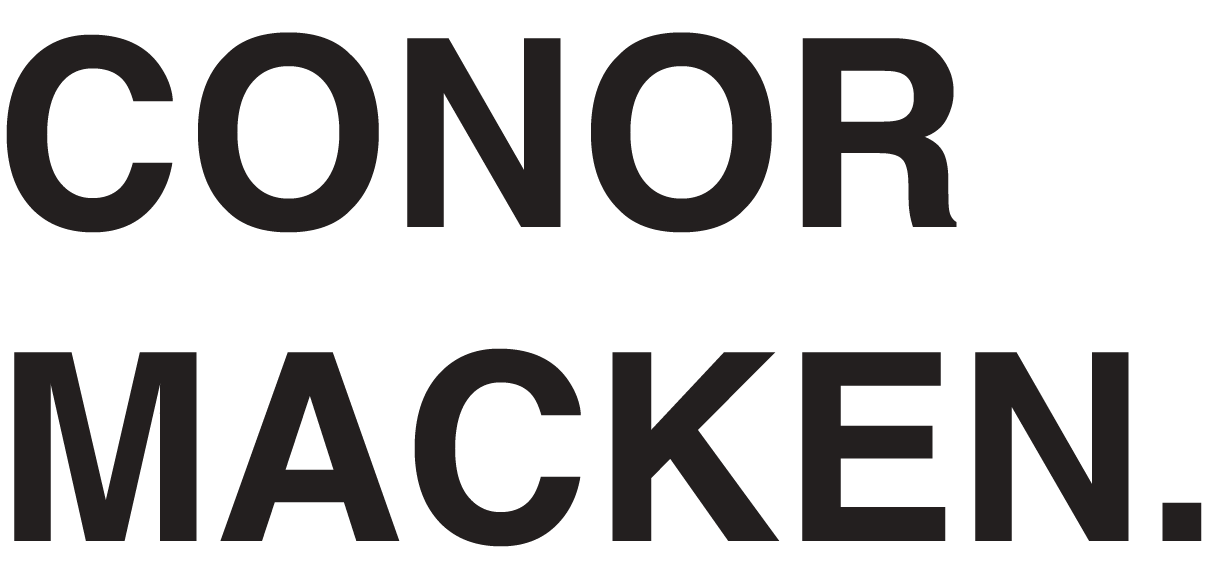
<style>
.page{position:relative;width:1212px;height:572px;background:#ffffff}
.page>*{position:absolute;margin:0}
.t1{font:262.1px "Helvetica-Bold";color:#231f1f}
</style>
<div class="page">
<p class="t1" style="left:6px;top:32px;width:1196px;height:515px">CONOR<br>MACKEN.</p>
</div>
